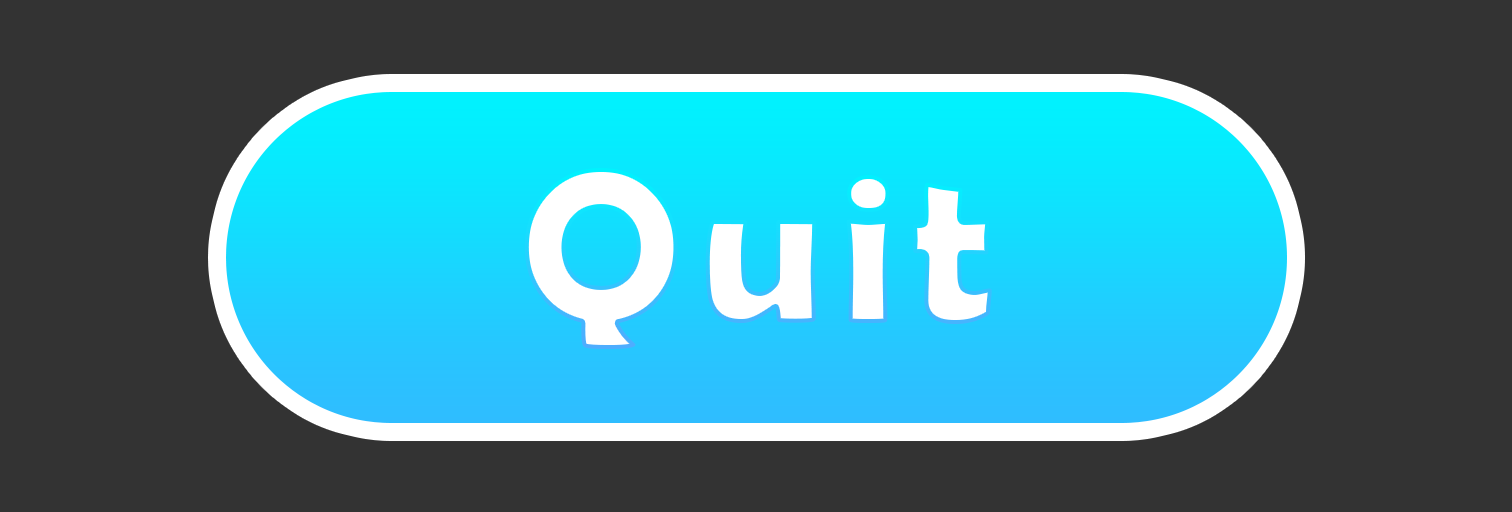
<style>
.page{position:relative;width:1512px;height:512px;background:#333333}
.page>*{position:absolute;margin:0}
.t1{font:218.9px "BerlinSansFBDemi-Bold";letter-spacing:0.06em;color:#ffffff}
</style>
<div class="page">
<p class="t1" style="left:524px;top:168px;width:468px;height:181px">Quit</p>
</div>
